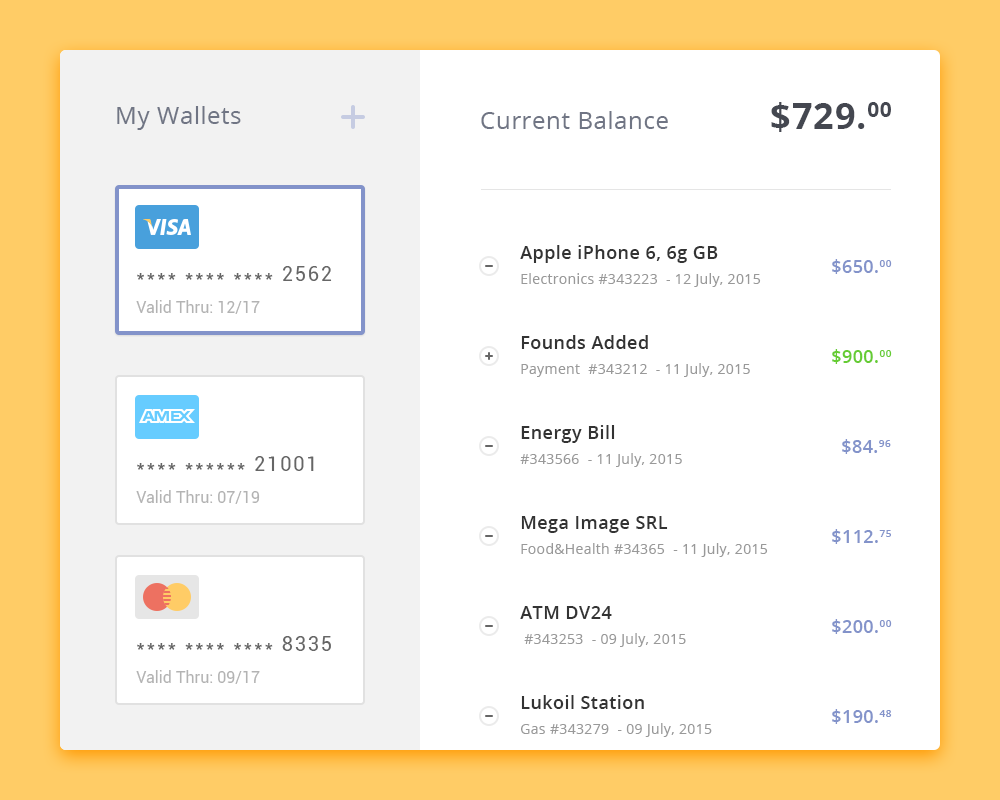
<style>
.page{position:relative;width:1000px;height:800px;background:#ffffff}
.page>*{position:absolute;margin:0}
.t1{font:36px "OpenSans-Bold";letter-spacing:0.025em;color:#444751}
.t2{font:24px "OpenSans";letter-spacing:0.025em;color:#707584}
.t3{font:18px "OpenSans-Semibold";letter-spacing:0.025em;color:#333333}
.t4{font:20px "Roboto-Regular";letter-spacing:0.09em;color:#666666}
.t5{font:18px "OpenSans-Semibold";letter-spacing:0.025em;color:#8393ca}
.t6{font:14px "OpenSans";letter-spacing:0.025em;color:#999999}
.t7{font:16px "Roboto-Regular";color:#b3b3b3}
.t8{font:16px "Roboto-Regular";color:#b3b3b3;text-transform:uppercase}
.t9{font:18px "OpenSans-Semibold";letter-spacing:0.025em;color:#66cc33}
</style>
<div class="page">
<p class="t1" style="left:771px;top:102px;width:120px;height:30px">$729.00</p>
<p class="t2" style="left:117px;top:106px;width:124px;height:24px">My Wallets</p>
<p class="t2" style="left:481px;top:111px;width:187px;height:18px">Current Balance</p>
<p class="t3" style="left:520px;top:245px;width:198px;height:18px">Apple iPhone 6, 6g GB</p>
<p class="t4" style="left:137px;top:266px;width:195px;height:15px">**** **** **** 2562</p>
<p class="t5" style="left:832px;top:259px;width:60px;height:15px">$650.00</p>
<p class="t6" style="left:521px;top:273px;width:240px;height:14px">Electronics #343223  - 12 July, 2015</p>
<p class="t7" style="left:136px;top:300px;width:124px;height:14px">Valid Thru: <span class="t8">12/17</span></p>
<p class="t3" style="left:521px;top:335px;width:127px;height:14px">Founds Added</p>
<p class="t9" style="left:832px;top:349px;width:60px;height:15px">$900.00</p>
<p class="t6" style="left:521px;top:363px;width:229px;height:14px">Payment  #343212  - 11 July, 2015</p>
<p class="t3" style="left:521px;top:425px;width:94px;height:18px">Energy Bill</p>
<p class="t5" style="left:842px;top:439px;width:49px;height:15px">$84.96</p>
<p class="t4" style="left:137px;top:456px;width:177px;height:15px">**** ****** 21001</p>
<p class="t6" style="left:520px;top:453px;width:162px;height:14px">#343566  - 11 July, 2015</p>
<p class="t7" style="left:136px;top:490px;width:124px;height:14px">Valid Thru: <span class="t8">07/19</span></p>
<p class="t3" style="left:521px;top:516px;width:147px;height:17px">Mega Image SRL</p>
<p class="t5" style="left:832px;top:529px;width:59px;height:15px">$112.75</p>
<p class="t6" style="left:521px;top:543px;width:247px;height:14px">Food&amp;Health #34365  - 11 July, 2015</p>
<p class="t3" style="left:520px;top:606px;width:92px;height:13px">ATM DV24</p>
<p class="t5" style="left:832px;top:619px;width:60px;height:15px">$200.00</p>
<p class="t4" style="left:137px;top:636px;width:194px;height:15px">**** **** **** 8335</p>
<p class="t6" style="left:524px;top:633px;width:162px;height:14px">#343253  - 09 July, 2015</p>
<p class="t7" style="left:136px;top:670px;width:124px;height:14px">Valid Thru: <span class="t8">09/17</span></p>
<p class="t3" style="left:521px;top:695px;width:123px;height:14px">Lukoil Station</p>
<p class="t5" style="left:832px;top:709px;width:60px;height:15px">$190.48</p>
<p class="t6" style="left:521px;top:723px;width:191px;height:14px">Gas #343279  - 09 July, 2015</p>
</div>
